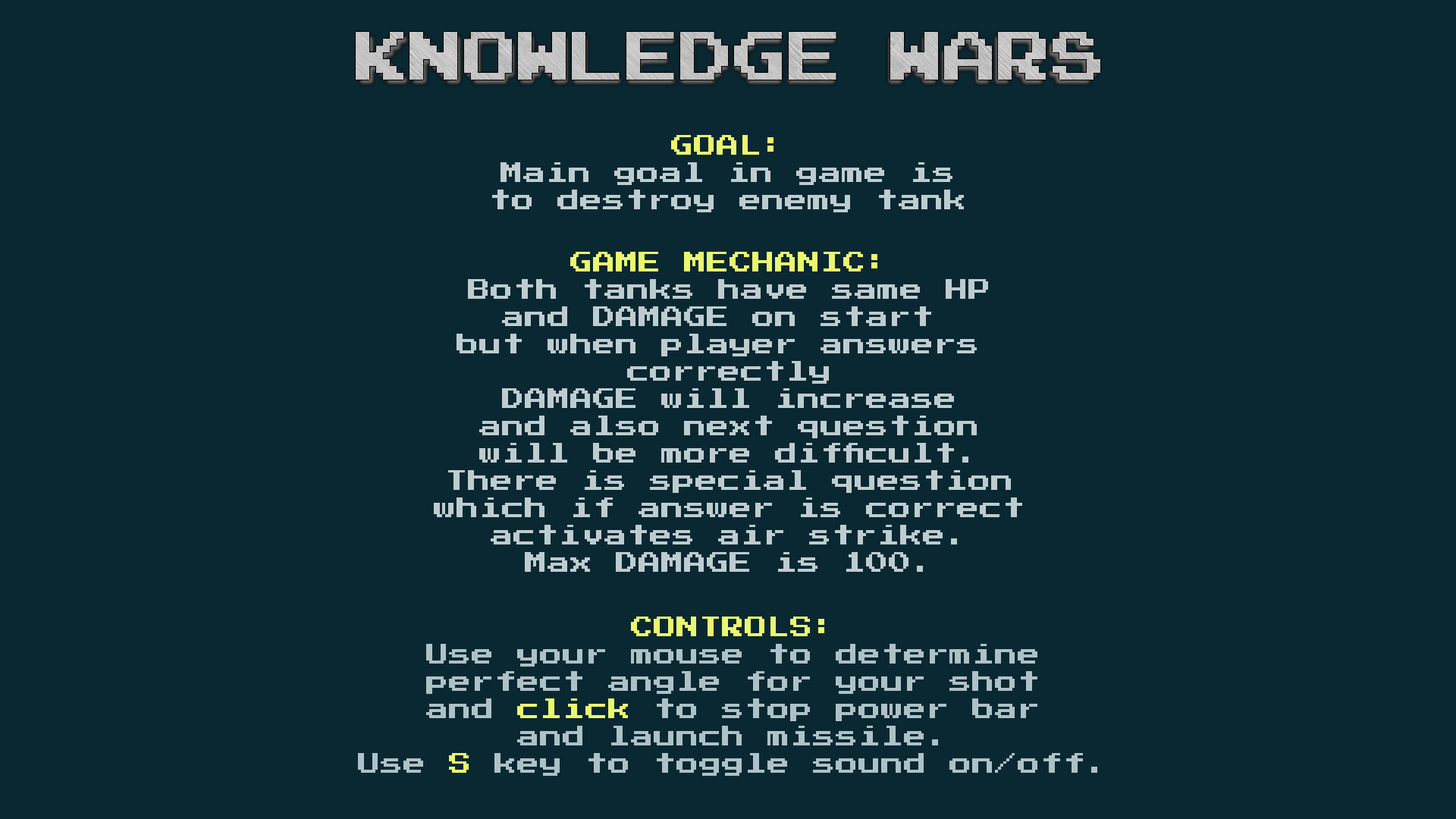
<style>
.page{position:relative;width:1456px;height:819px;background:#0a2832}
.page>*{position:absolute;margin:0}
.t1{font:22.7px "PressStart2P-Regular";color:#beccd0}
.t2{font:22.7px "PressStart2P-Regular";color:#ebf66f}
.t3{font:22.7px "PressStart2P-Regular";color:#adc1c7}
</style>
<div class="page">
<p class="t1" style="left:492px;top:135px;width:472px;height:77px;text-align:center"><span class="t2">GOAL:<br></span>Main goal in game is<br>to destroy enemy tank</p>
<p class="t1" style="left:434px;top:252px;width:588px;height:320px;text-align:center"><span class="t2">GAME MECHANIC:<br></span>Both tanks have same HP<br>and DAMAGE on start <br>but when player answers <br>correctly<br>DAMAGE will increase<br>and also next question<br>will be more difficult.<br>There is special question<br>which if answer is correct<br>activates air strike.<br>Max DAMAGE is 100.</p>
<p class="t3" style="left:358px;top:617px;width:739px;height:159px;text-align:center"><span class="t2">CONTROLS:<br></span>Use your mouse to determine<br>perfect angle for your shot<br>and <span class="t2">click</span> to stop power bar<br>and launch missile.<br>Use <span class="t2">S</span> key to toggle sound on/off.</p>
</div>
